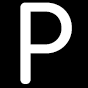
<style>
.page{position:relative;width:88px;height:88px;background:#000000}
.page>*{position:absolute;margin:0}
.t1{font:113px "VAGRounded-Light";color:#ffffff}
</style>
<div class="page">
<p class="t1" style="left:20px;top:2px;width:52px;height:82px">P</p>
</div>
